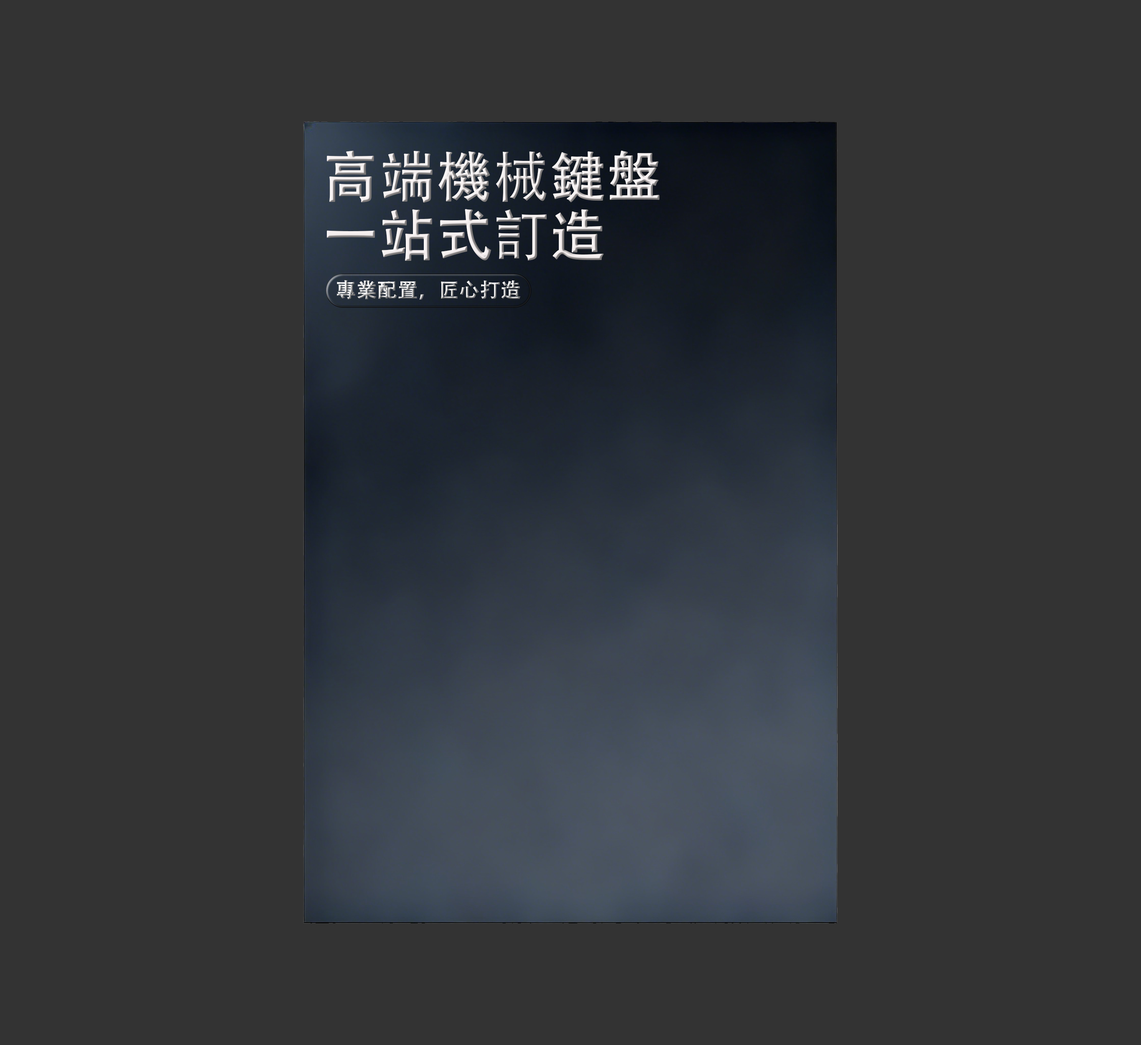
<style>
.page{position:relative;width:1141px;height:1045px;background:#333333}
.page>*{position:absolute;margin:0}
.t1{font:55.3px/58.5px "AdobeHeitiStd-Regular";font-weight:bold}
.t2{font:20.1px "AdobeHeitiStd-Regular";font-weight:bold}
</style>
<div class="page">
<p class="t1" style="left:327px;top:150px;width:333px;height:111px">高端機械鍵盤<br>一站式訂造</p>
<p class="t2" style="left:337px;top:280px;width:183px;height:20px">專業配置，匠心打造</p>
</div>
